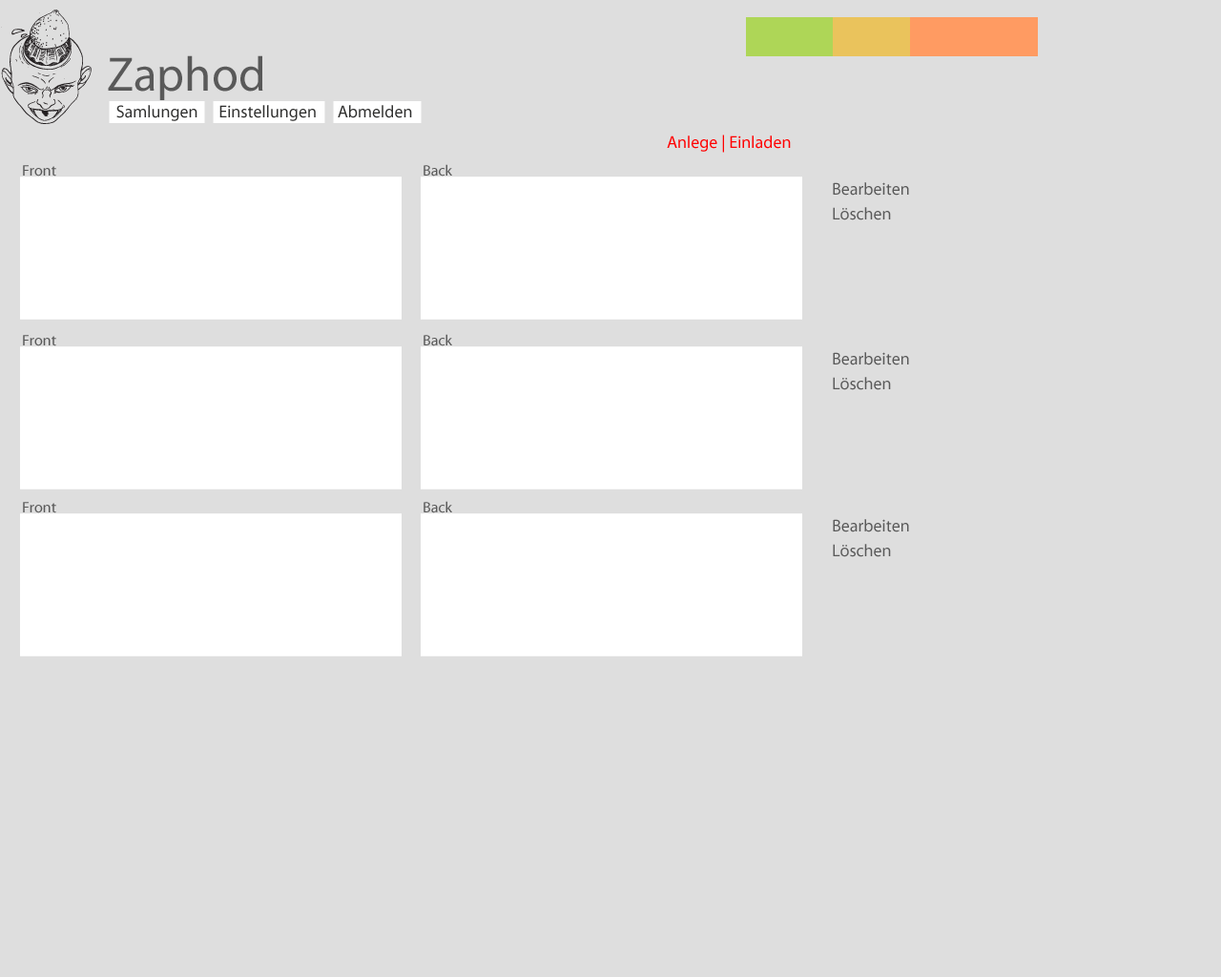
<style>
.page{position:relative;width:1221px;height:977px;background:#dedede}
.page>*{position:absolute;margin:0}
.t1{font:48.6px "MyriadPro-Regular";color:#585858}
.t2{font:17.2px "MyriadPro-Regular";color:#2e2e2d}
.t3{font:17.2px "MyriadPro-Regular";color:#ff0000}
.t4{font:15.3px "MyriadPro-Regular";color:#595959}
.t5{font:17.2px/24.8px "MyriadPro-Regular";color:#595959}
</style>
<div class="page">
<p class="t1" style="left:108px;top:55px;width:155px;height:45px">Zaphod</p>
<p class="t2" style="left:116px;top:105px;width:296px;height:16px">Samlungen Einstellungen Abmelden</p>
<p class="t3" style="left:667px;top:134px;width:124px;height:19px">Anlege | Einladen</p>
<p class="t4" style="left:23px;top:165px;width:33px;height:11px">Front</p>
<p class="t4" style="left:423px;top:164px;width:29px;height:12px">Back</p>
<p class="t5" style="left:833px;top:182px;width:76px;height:38px">Bearbeiten<br>Löschen</p>
<p class="t4" style="left:23px;top:335px;width:33px;height:11px">Front</p>
<p class="t4" style="left:423px;top:334px;width:29px;height:12px">Back</p>
<p class="t5" style="left:833px;top:352px;width:76px;height:38px">Bearbeiten<br>Löschen</p>
<p class="t4" style="left:23px;top:502px;width:33px;height:11px">Front</p>
<p class="t4" style="left:423px;top:501px;width:29px;height:12px">Back</p>
<p class="t5" style="left:833px;top:519px;width:76px;height:38px">Bearbeiten<br>Löschen</p>
</div>
